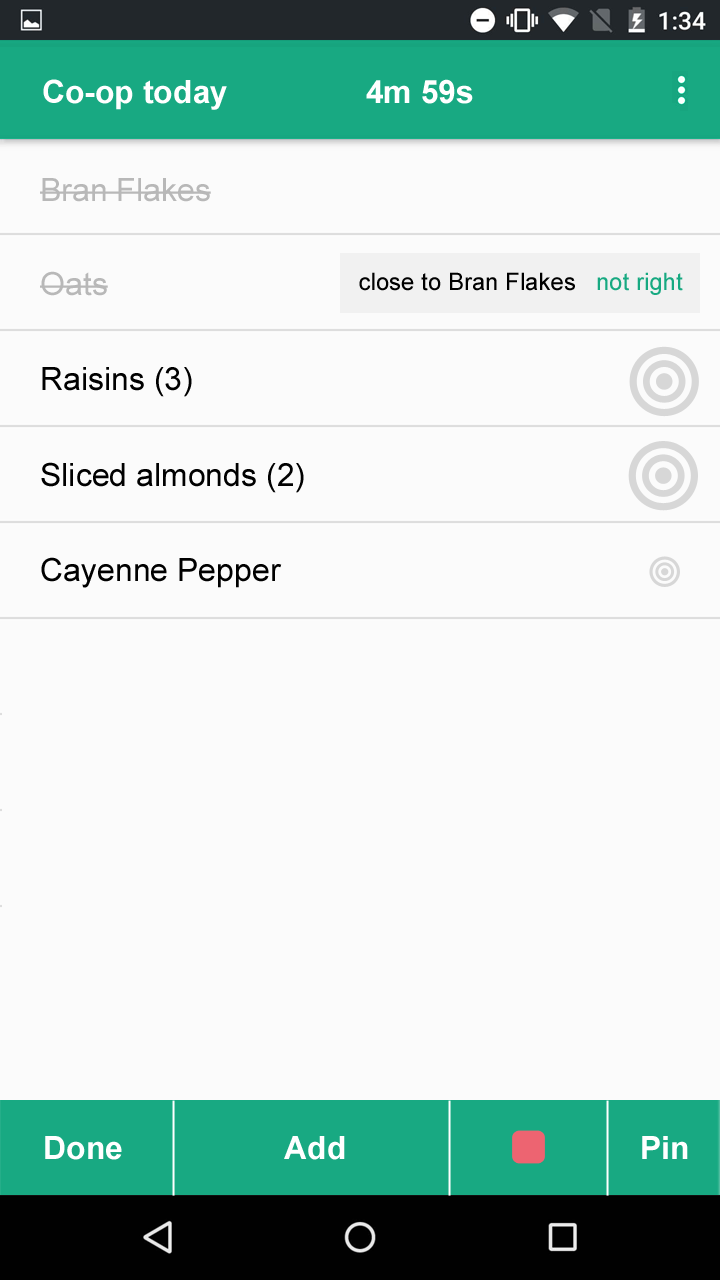
<style>
.page{position:relative;width:720px;height:1280px;background:#fbfbfb}
.page>*{position:absolute;margin:0}
.t1{font:32px "Arial-BoldMT";color:#ffffff}
.t2{font:32px "ArialMT";color:#b8b8b8}
.t3{font:24px "ArialMT";color:#000000}
.t4{font:24px "ArialMT";color:#17a981}
.t5{font:32px "ArialMT";color:#000000}
</style>
<div class="page">
<p class="t1" style="left:43px;top:79px;width:430px;height:31px">Co-op today    4m 59s</p>
<p class="t2" style="left:40px;top:178px;width:171px;height:24px">Bran Flakes</p>
<p class="t2" style="left:40px;top:271px;width:68px;height:25px">Oats</p>
<p class="t3" style="left:359px;top:272px;width:324px;height:23px">close to Bran Flakes   <span class="t4">not right</span></p>
<p class="t5" style="left:42px;top:367px;width:150px;height:30px">Raisins (3)</p>
<p class="t5" style="left:41px;top:462px;width:263px;height:31px">Sliced almonds (2)</p>
<p class="t5" style="left:41px;top:557px;width:241px;height:31px">Cayenne Pepper</p>
<p class="t1" style="left:45px;top:1136px;width:77px;height:24px">Done</p>
<p class="t1" style="left:284px;top:1136px;width:61px;height:24px">Add</p>
<p class="t1" style="left:642px;top:1136px;width:46px;height:23px">Pin</p>
</div>
